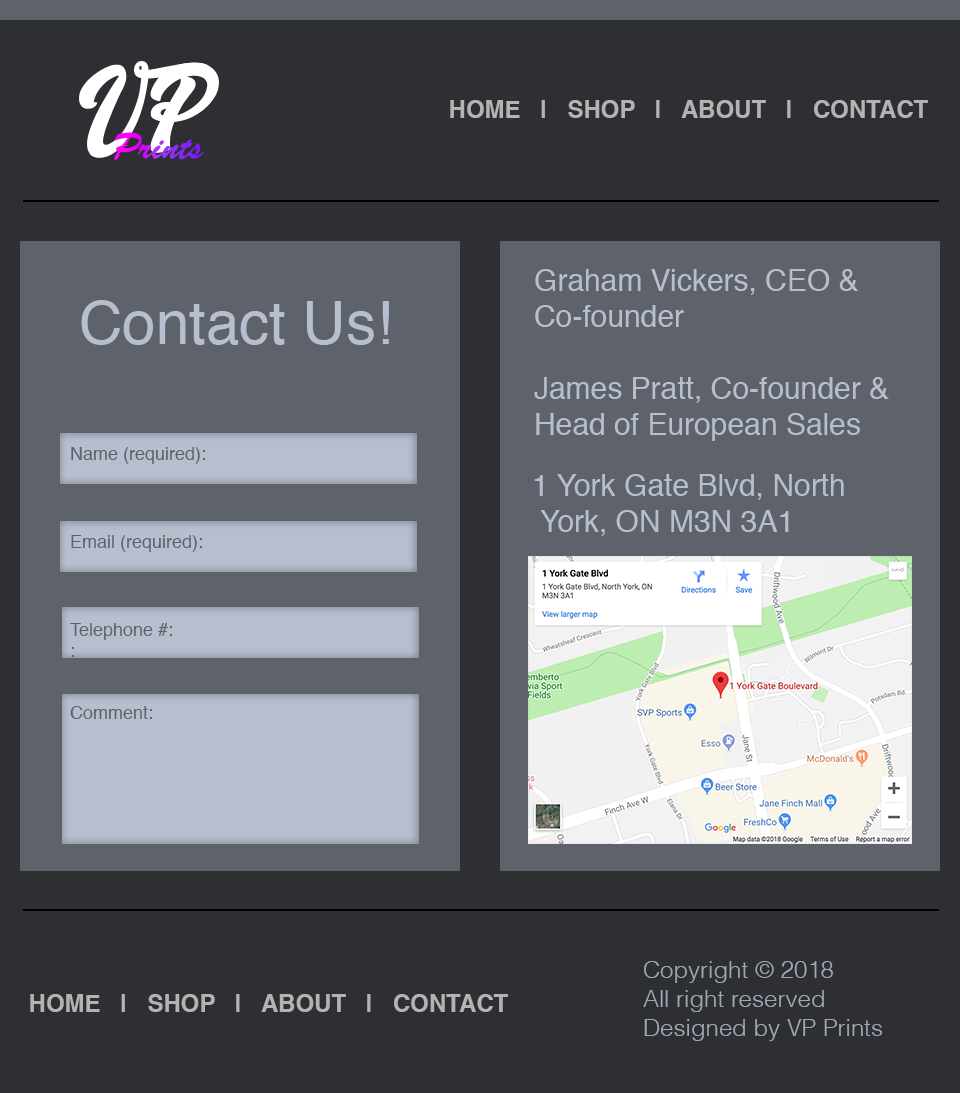
<style>
.page{position:relative;width:960px;height:1093px;background:#2d2f33}
.page>*{position:absolute;margin:0}
.t1{font:24px "Helvetica-Bold";color:#b3b3b3}
.t2{font:30px "Helvetica";color:#b7bece}
.t3{font:60px "Helvetica";color:#b7bece}
.t4{font:18px "Helvetica";color:#5e626a}
.t5{font:24px "Helvetica-Light";color:#a1a7b5}
</style>
<div class="page">
<p class="t1" style="left:450px;top:100px;width:478px;height:18px">HOME   |   SHOP   |   ABOUT   |   CONTACT</p>
<p class="t2" style="left:534px;top:269px;width:355px;height:172px">Graham Vickers, CEO &amp; Co-founder <br><br>James Pratt, Co-founder &amp; Head of European Sales</p>
<p class="t3" style="left:81px;top:300px;width:308px;height:45px">Contact Us!</p>
<p class="t4" style="left:71px;top:447px;width:134px;height:17px">Name (required):</p>
<p class="t2" style="left:534px;top:474px;width:310px;height:62px">1 York Gate Blvd, North<br> York, ON M3N 3A1</p>
<p class="t4" style="left:71px;top:535px;width:131px;height:17px">Email (required):</p>
<p class="t4" style="left:70px;top:623px;width:102px;height:34px">Telephone #:<br>:</p>
<p class="t4" style="left:70px;top:706px;width:82px;height:13px">Comment:</p>
<p class="t5" style="left:643px;top:961px;width:239px;height:80px">Copyright © 2018 <br>All right reserved <br>Designed by VP Prints</p>
<p class="t1" style="left:30px;top:994px;width:478px;height:18px">HOME   |   SHOP   |   ABOUT   |   CONTACT</p>
</div>
